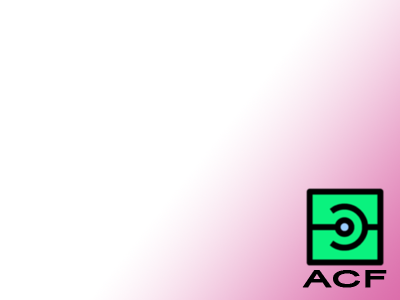
<style>
.page{position:relative;width:400px;height:300px;background:#ffffff}
.page>*{position:absolute;margin:0}
.t1{font:24.4px "ArialMT";color:#000000;font-weight:bold;scale:1.67 1}
</style>
<div class="page">
<p class="t1" style="left:302px;top:270px;width:85px;height:18px">ACF</p>
</div>
